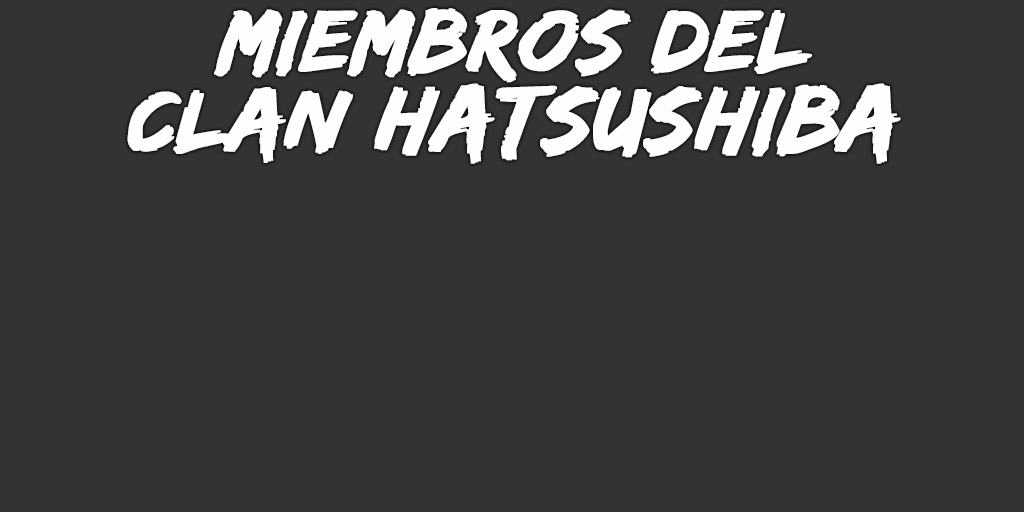
<style>
.page{position:relative;width:1024px;height:512px;background:#333333}
.page>*{position:absolute;margin:0}
.t1{font:90px/80px "EdoSZ";color:#fefefe;font-weight:bold;font-style:italic;scale:1.04 1}
.t2{font:95px/80px "EdoSZ";color:#fefefe;font-weight:bold;font-style:italic;scale:1.04 1}
</style>
<div class="page">
<p class="t1" style="left:127px;top:8px;width:774px;height:156px;text-align:center">miembros del<br>clan <span class="t2">Hatsushiba</span></p>
</div>
